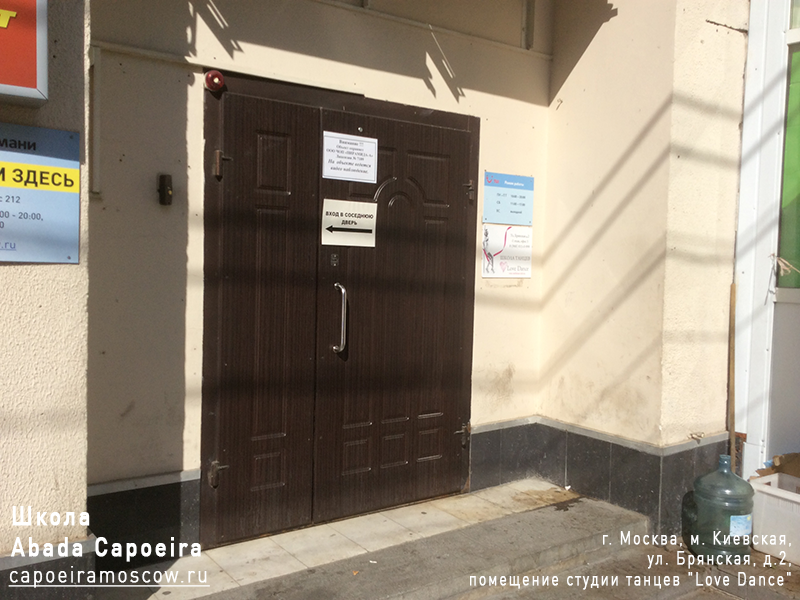
<style>
.page{position:relative;width:800px;height:600px}
.page>*{position:absolute;margin:0}
.t1{font:26.8px/30.7px "DINPro-Medium";letter-spacing:0.1em;color:#ffffff;font-weight:bold;scale:0.82 1}
.t2{font:17.6px/20.2px "DINPro-Light";letter-spacing:0.1em;color:#ffffff;font-weight:bold;scale:0.82 1}
.t3{font:22.9px "DINPro-Light";letter-spacing:0.1em;color:#ffffff;font-weight:bold;text-decoration:underline;scale:0.82 1}
</style>
<div class="page">
<p class="t1" style="left:10px;top:506px;width:191px;height:56px">Школа <br>Abada Capoeira</p>
<p class="t2" style="left:470px;top:531px;width:321px;height:59px;text-align:right">г. Москва, м. Киевская,<br> ул. Брянская, д.2,<br> помещение студии танцев "Love Dance"</p>
<p class="t3" style="left:8px;top:566px;width:202px;height:22px">capoeiramoscow.ru</p>
</div>
